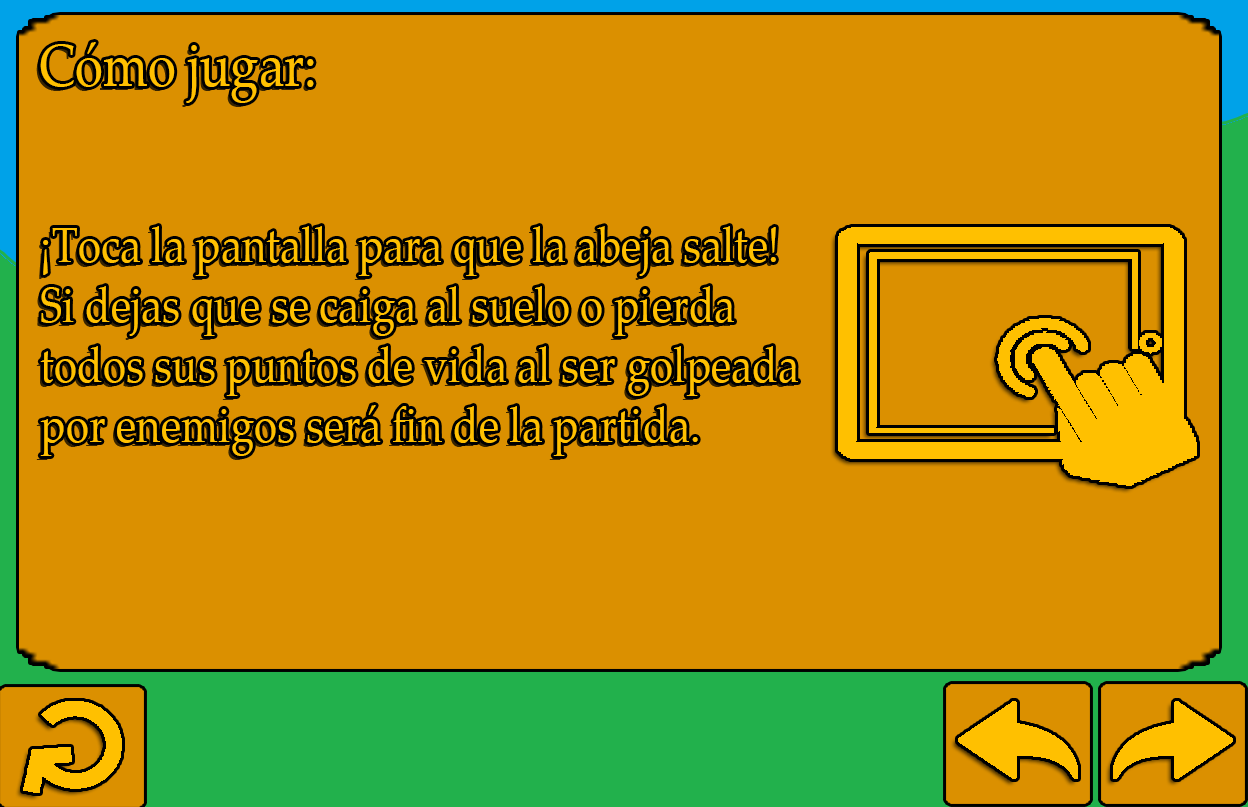
<style>
.page{position:relative;width:1248px;height:807px;background:#db9000}
.page>*{position:absolute;margin:0}
.t1{font:60px "PalatinoLinotype-Roman";color:#ffc000;scale:0.84 1}
.t2{font:50px "PalatinoLinotype-Roman";color:#ffc000;scale:0.84 1}
</style>
<div class="page">
<p class="t1" style="left:40px;top:42px;width:274px;height:61px">Cómo jugar:</p>
<p class="t2" style="left:40px;top:226px;width:758px;height:230px">¡Toca la pantalla para que la abeja salte!<br>Si dejas que se caiga al suelo o pierda<br>todos sus puntos de vida al ser golpeada<br>por enemigos será fin de la partida.</p>
</div>
